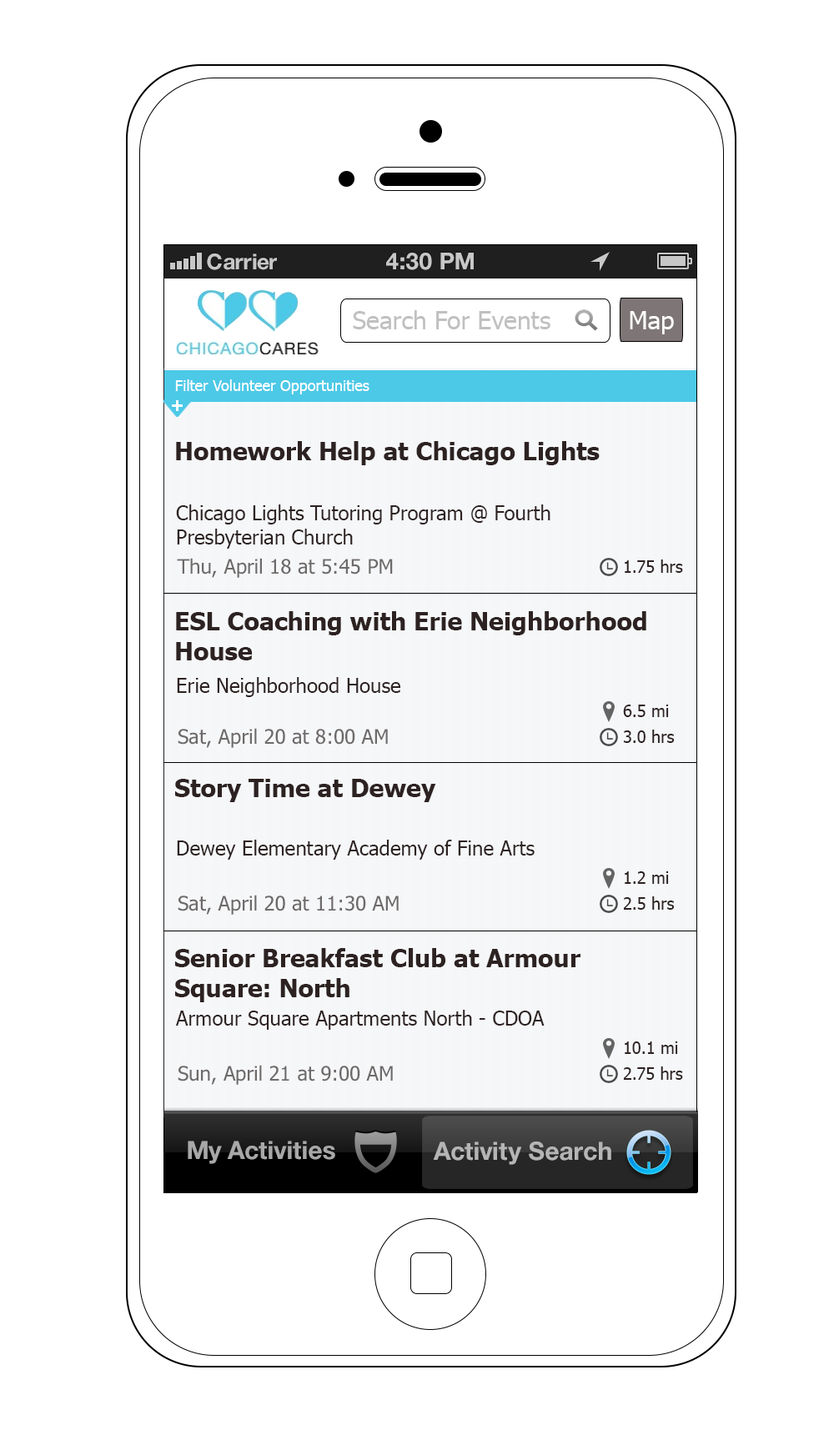
<style>
.page{position:relative;width:834px;height:1430px;background:#ffffff}
.page>*{position:absolute;margin:0}
.t1{font:21.7px "HelveticaNeue-Bold";color:#c7c7c7}
.t2{font:23.3px "HelveticaNeue-Bold";color:#c7c7c7;text-transform:uppercase}
.t3{font:25px "Tahoma";color:#c0c0c0}
.t4{font:25px "Tahoma";color:#fefbfb}
.t5{font:15px "Tahoma";color:#ffffff}
.t6{font:25px "Tahoma-Bold";color:#2d2222}
.t7{font:20px "Tahoma";color:#2d2222}
.t8{font:20px "Tahoma";color:#6d6a6a}
.t9{font:16.7px "Tahoma";color:#2d2222}
.t10{font:25px "HelveticaNeue-Bold";color:#a8a8a8}
</style>
<div class="page">
<p class="t1" style="left:207px;top:253px;width:70px;height:17px">Carrier</p>
<p class="t2" style="left:386px;top:253px;width:88px;height:17px">4:30 PM</p>
<p class="t3" style="left:353px;top:310px;width:197px;height:19px">Search For Events</p>
<p class="t4" style="left:630px;top:311px;width:44px;height:23px">Map</p>
<p class="t5" style="left:175px;top:379px;width:194px;height:15px">Filter Volunteer Opportunities</p>
<p class="t6" style="left:176px;top:441px;width:424px;height:24px">Homework Help at Chicago Lights</p>
<p class="t7" style="left:176px;top:504px;width:374px;height:45px">Chicago Lights Tutoring Program @ Fourth <br>Presbyterian Church</p>
<p class="t8" style="left:177px;top:558px;width:216px;height:20px">Thu, April 18 at 5:45 PM</p>
<p class="t9" style="left:625px;top:560px;width:58px;height:13px">1.75 hrs</p>
<p class="t6" style="left:176px;top:611px;width:470px;height:49px">ESL Coaching with Erie Neighborhood <br>House</p>
<p class="t7" style="left:177px;top:677px;width:223px;height:20px">Erie Neighborhood House</p>
<p class="t9" style="left:623px;top:705px;width:46px;height:12px">6.5 mi</p>
<p class="t8" style="left:178px;top:728px;width:210px;height:20px">Sat, April 20 at 8:00 AM</p>
<p class="t9" style="left:623px;top:730px;width:52px;height:13px">3.0 hrs</p>
<p class="t6" style="left:175px;top:779px;width:261px;height:23px">Story Time at Dewey</p>
<p class="t7" style="left:177px;top:840px;width:357px;height:20px">Dewey Elementary Academy of Fine Arts</p>
<p class="t9" style="left:625px;top:871px;width:44px;height:13px">1.2 mi</p>
<p class="t8" style="left:178px;top:895px;width:221px;height:20px">Sat, April 20 at 11:30 AM</p>
<p class="t9" style="left:623px;top:896px;width:52px;height:14px">2.5 hrs</p>
<p class="t6" style="left:175px;top:948px;width:405px;height:54px">Senior Breakfast Club at Armour<br>Square: North</p>
<p class="t7" style="left:176px;top:1010px;width:369px;height:20px">Armour Square Apartments North - CDOA</p>
<p class="t9" style="left:625px;top:1041px;width:53px;height:13px">10.1 mi</p>
<p class="t8" style="left:178px;top:1065px;width:215px;height:20px">Sun, April 21 at 9:00 AM</p>
<p class="t9" style="left:623px;top:1066px;width:60px;height:14px">2.75 hrs</p>
<p class="t10" style="left:188px;top:1141px;width:147px;height:23px">My Activities</p>
<p class="t10" style="left:433px;top:1142px;width:178px;height:23px">Activity Search</p>
</div>
